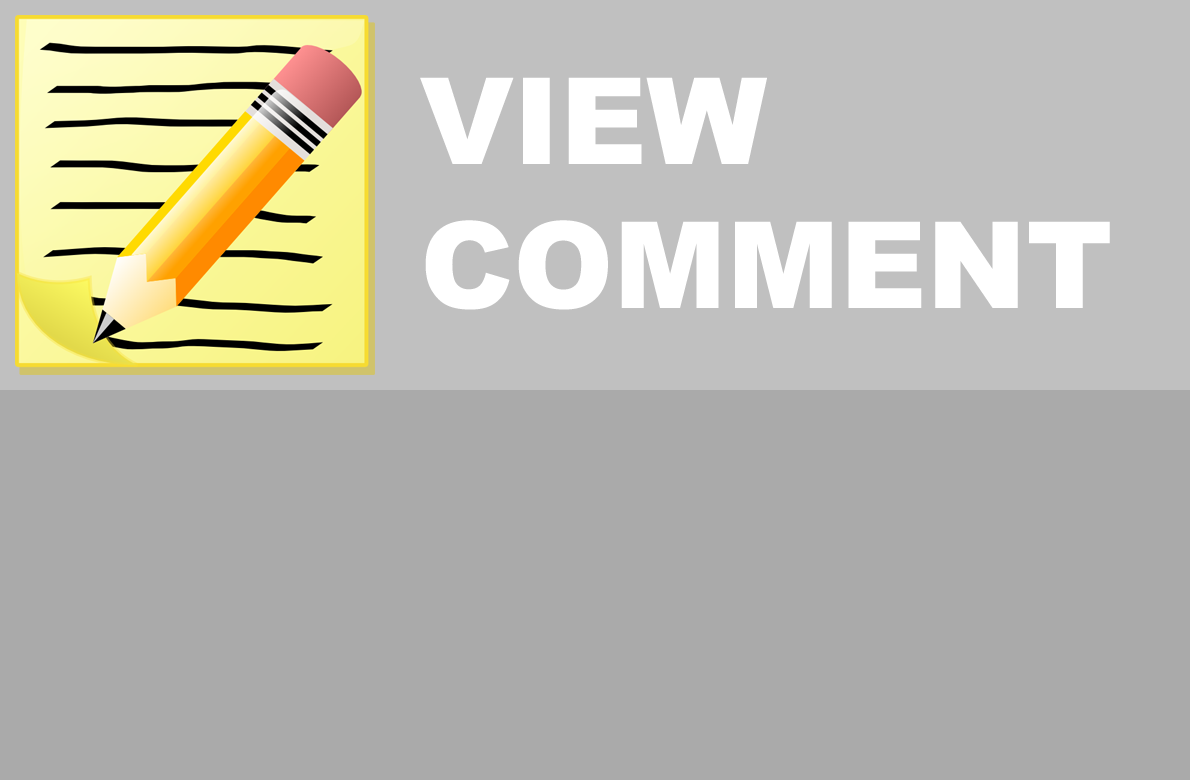
<style>
.page{position:relative;width:1190px;height:780px;background:#aaaaaa}
.page>*{position:absolute;margin:0}
.t1{font:120px "Arial-Black";color:#ffffff}
</style>
<div class="page">
<p class="t1" style="left:420px;top:77px;width:690px;height:233px">VIEW<br>COMMENT</p>
</div>
